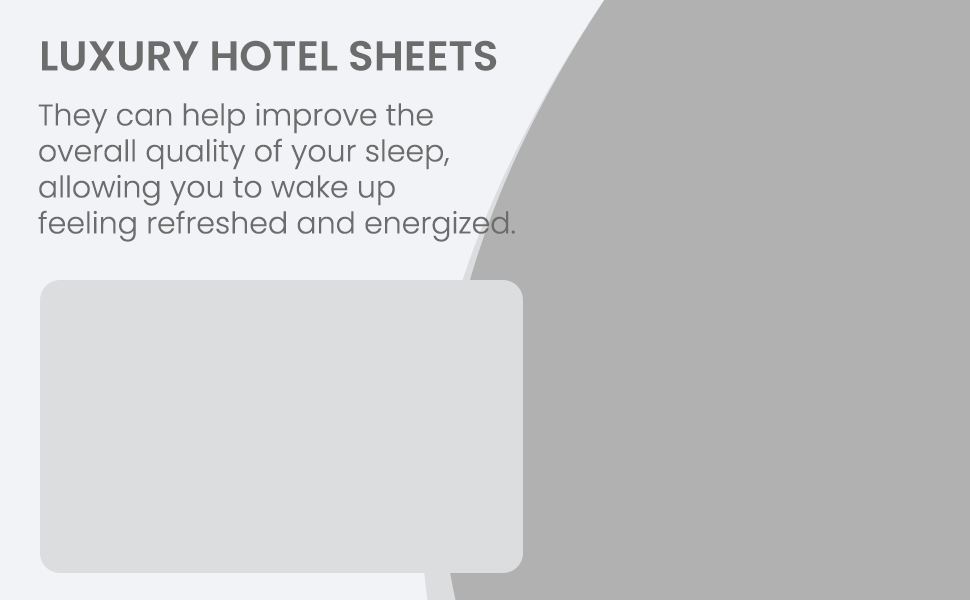
<style>
.page{position:relative;width:970px;height:600px;background:#b1b1b1}
.page>*{position:absolute;margin:0}
.t1{font:42px "Poppins-SemiBold";color:#6c6c6c;text-transform:uppercase}
.t2{font:30px "Poppins-Light";color:#6c6c6c}
</style>
<div class="page">
<p class="t1" style="left:42px;top:40px;width:455px;height:31px">LUXURY HOTEL SHEETS</p>
<p class="t2" style="left:38px;top:102px;width:477px;height:140px">They can help improve the <br>overall quality of your sleep, <br>allowing you to wake up <br>feeling refreshed and energized.</p>
</div>
